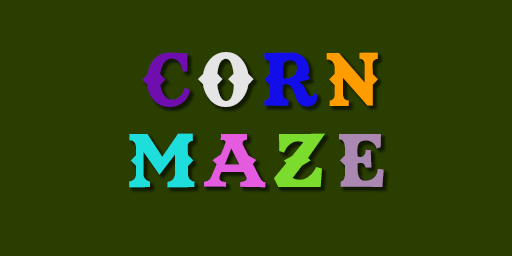
<style>
.page{position:relative;width:512px;height:256px;background:#2a3e00}
.page>*{position:absolute;margin:0}
.t1{font:72px "TexasTangoBOLDPERSONALUSE";letter-spacing:0.1em;color:#6f0dae}
.t2{font:72px "TexasTangoBOLDPERSONALUSE";letter-spacing:0.1em;color:#e5e5e5}
.t3{font:72px "TexasTangoBOLDPERSONALUSE";letter-spacing:0.1em;color:#120de9}
.t4{font:72px "TexasTangoBOLDPERSONALUSE";letter-spacing:0.1em;color:#ff9c00}
.t5{font:72px "TexasTangoBOLDPERSONALUSE";letter-spacing:0.1em;color:#1ededc}
.t6{font:72px "TexasTangoBOLDPERSONALUSE";letter-spacing:0.1em;color:#e45bdf}
.t7{font:72px "TexasTangoBOLDPERSONALUSE";letter-spacing:0.1em;color:#7cdc2e}
.t8{font:72px "TexasTangoBOLDPERSONALUSE";letter-spacing:0.1em;color:#aa88b1}
</style>
<div class="page">
<p class="t1" style="left:142px;top:52px;width:48px;height:55px">C</p>
<p class="t2" style="left:198px;top:52px;width:56px;height:55px">O</p>
<p class="t3" style="left:264px;top:52px;width:53px;height:55px">R</p>
<p class="t4" style="left:326px;top:52px;width:52px;height:54px">N</p>
<p class="t5" style="left:129px;top:133px;width:66px;height:55px">M</p>
<p class="t6" style="left:204px;top:134px;width:62px;height:54px">A</p>
<p class="t7" style="left:274px;top:133px;width:51px;height:54px">Z</p>
<p class="t8" style="left:338px;top:134px;width:46px;height:53px">E</p>
</div>
